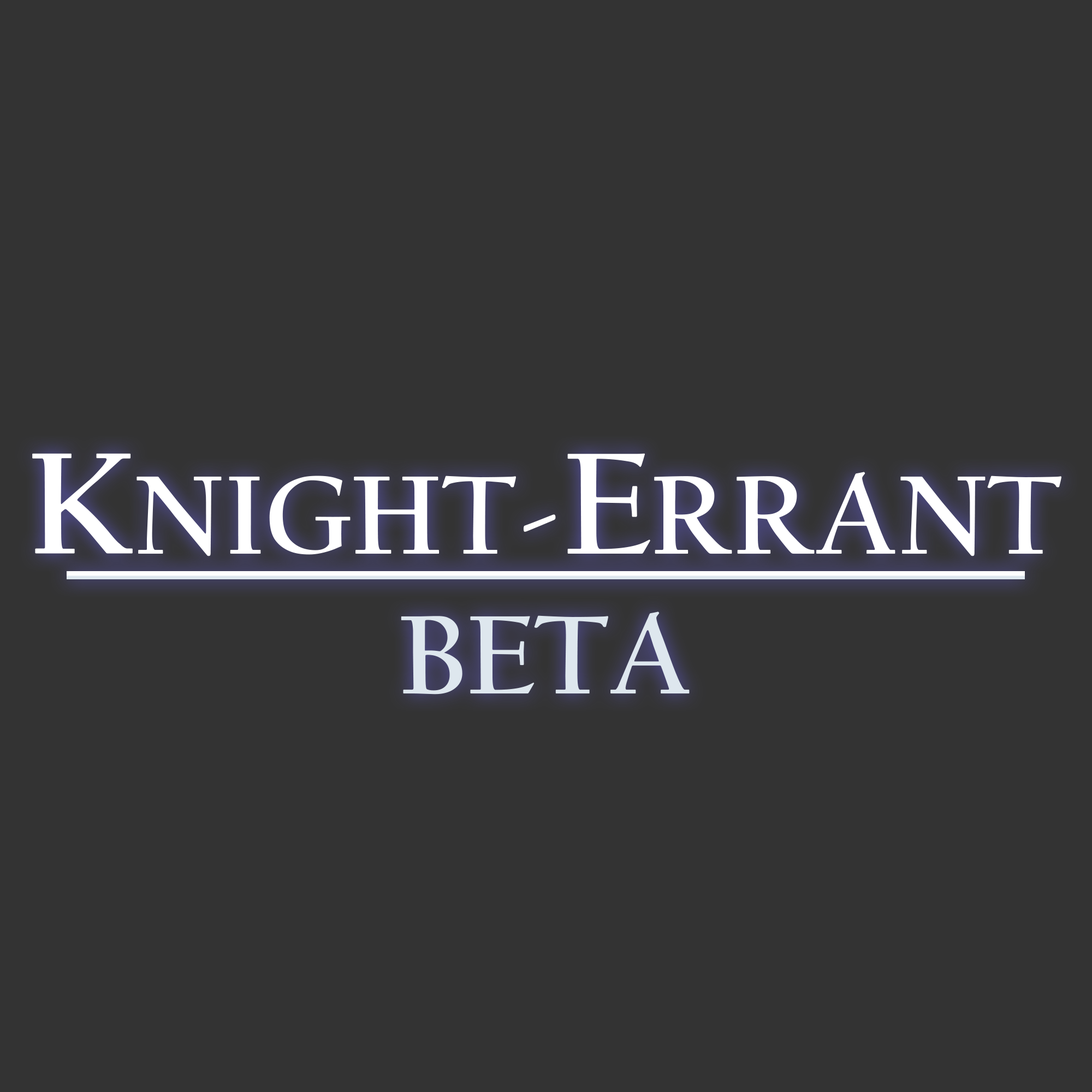
<style>
.page{position:relative;width:1092px;height:1092px;background:#333333}
.page>*{position:absolute;margin:0}
.t1{font:116.4px "CalifornianFB-Bold";color:#f7f6f6}
.t2{font:150.7px "CalifornianFB-Bold";color:#f7f6f6}
</style>
<div class="page">
<p class="t1" style="left:32px;top:453px;width:1029px;height:242px;text-align:center"><span class="t2">K</span>NIGHT-<span class="t2">E</span>RRANT<br>BETA</p>
</div>
